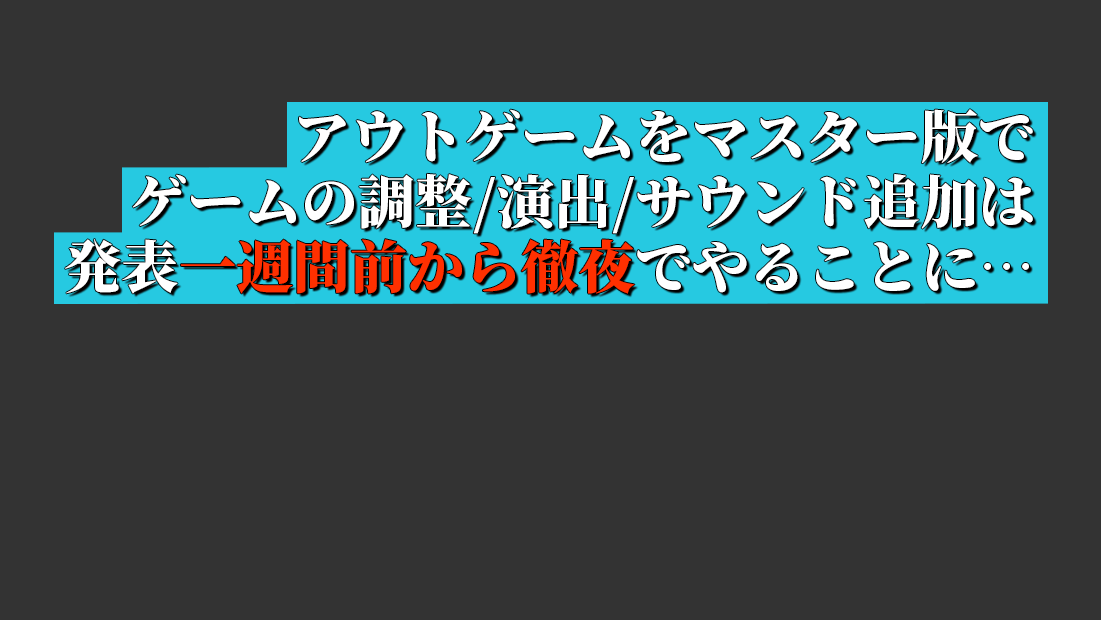
<style>
.page{position:relative;width:1101px;height:620px;background:#333333}
.page>*{position:absolute;margin:0}
.t1{font:57.1px/64.8px "SourceHanSerif-Heavy";color:#ffffff}
.t2{font:57.1px/64.8px "SourceHanSerif-Heavy";color:#ff3000}
</style>
<div class="page">
<p class="t1" style="left:65px;top:109px;width:968px;height:185px;text-align:right">アウトゲームをマスター版で<br>ゲームの調整/演出/サウンド追加は<br>発表<span class="t2">一週間前から徹夜</span>でやることに…</p>
</div>
